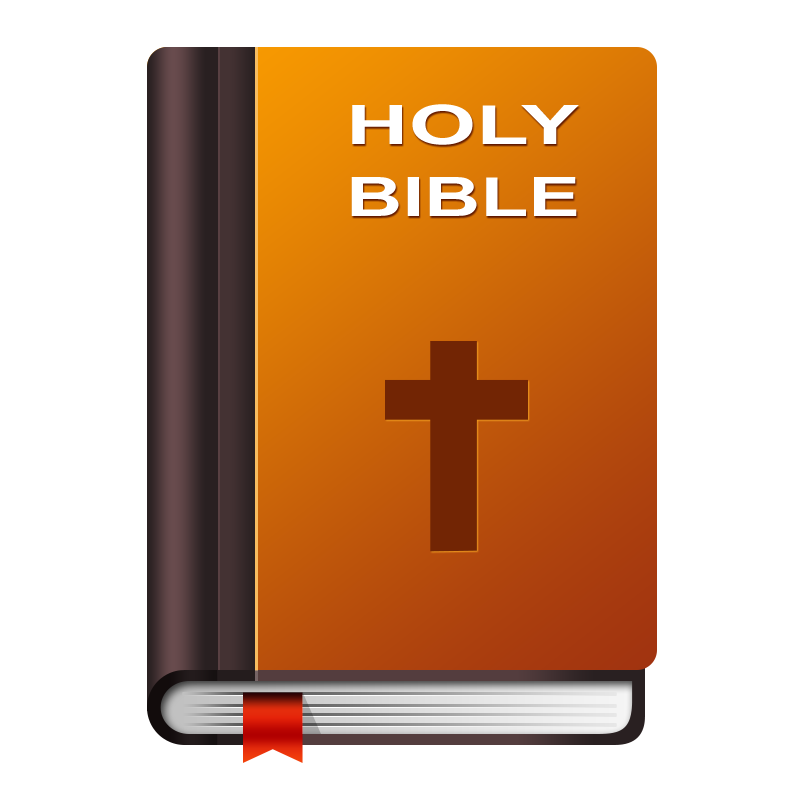
<style>
.page{position:relative;width:800px;height:800px;background:#ffffff}
.page>*{position:absolute;margin:0}
.t1{font:54.2px "Arial-BoldMT";color:#ffffff;scale:1.6 1}
.t2{font:54.2px "Arial-BoldMT";color:#ffffff;scale:1.44 1}
</style>
<div class="page">
<p class="t1" style="left:352px;top:104px;width:227px;height:41px">HOLY</p>
<p class="t2" style="left:351px;top:177px;width:226px;height:39px">BIBLE</p>
</div>
